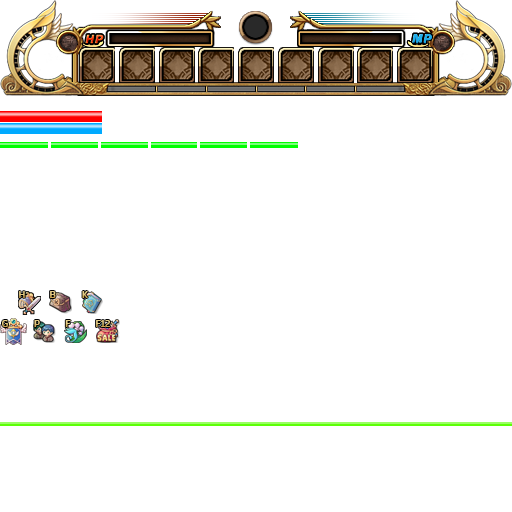
<style>
.page{position:relative;width:512px;height:512px;background:#ffffff}
.page>*{position:absolute;margin:0}
.t1{font:9px "Mitr-Regular";color:#e3ca82}
.t2{font:9px "Mitr-Regular"}
.t3{font:9px "Mitr-Regular";color:#e4cc85}
</style>
<div class="page">
<p class="t1" style="left:19px;top:291px;width:6px;height:7px">H</p>
<p class="t2" style="left:50px;top:291px;width:6px;height:7px">B</p>
<p class="t1" style="left:82px;top:291px;width:6px;height:7px">K</p>
<p class="t2" style="left:2px;top:320px;width:6px;height:7px">G</p>
<p class="t1" style="left:34px;top:320px;width:6px;height:7px">P</p>
<p class="t3" style="left:65px;top:320px;width:6px;height:7px">F</p>
<p class="t2" style="left:96px;top:320px;width:14px;height:7px">F12</p>
</div>
